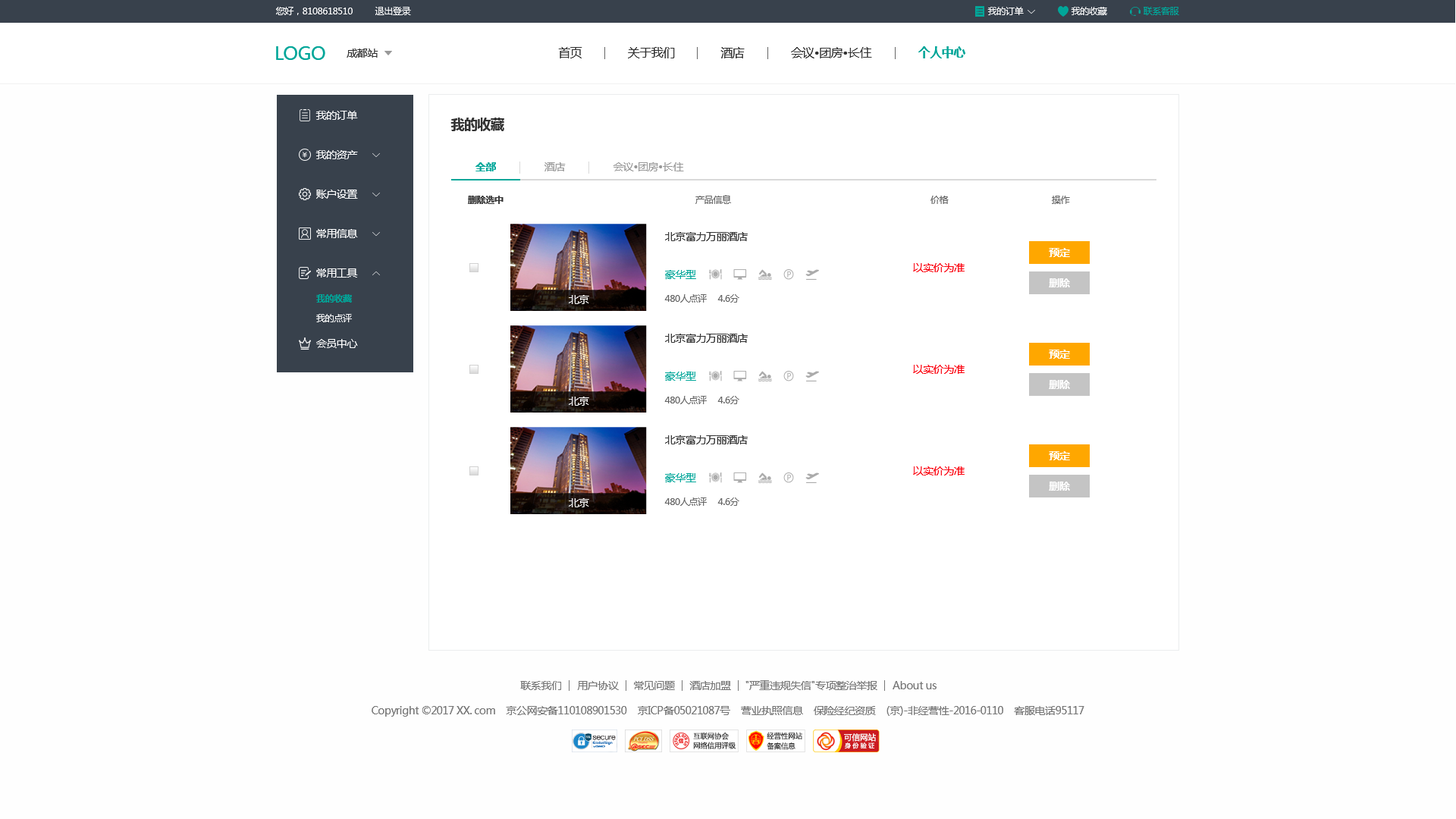
<style>
.page{position:relative;width:1456px;height:819px;background:#fefefe}
.page>*{position:absolute;margin:0}
.t1{font:9.1px "MicrosoftYaHei";letter-spacing:-0.03em;color:#ffffff}
.t2{font:9.1px "MicrosoftYaHei";letter-spacing:-0.03em;color:#00a699}
.t3{font:18.2px "MicrosoftYaHei";letter-spacing:-0.03em;color:#00a699}
.t4{font:10.6px "MicrosoftYaHei";letter-spacing:-0.03em;color:#333333}
.t5{font:12.1px "MicrosoftYaHei";letter-spacing:-0.03em;color:#333333}
.t6{font:12.1px "MicrosoftYaHei-Bold";letter-spacing:-0.03em;color:#00a699}
.t7{font:10.6px "MicrosoftYaHei";letter-spacing:-0.03em;color:#ffffff}
.t8{font:13.6px "MicrosoftYaHei-Bold";letter-spacing:-0.03em;color:#333333}
.t9{font:10.6px "MicrosoftYaHei-Bold";letter-spacing:-0.03em;color:#00a699}
.t10{font:10.6px "MicrosoftYaHei";letter-spacing:-0.03em;color:#999999}
.t11{font:9.1px "MicrosoftYaHei-Bold";letter-spacing:-0.03em;color:#333333}
.t12{font:9.1px "MicrosoftYaHei";letter-spacing:-0.03em;color:#666666}
.t13{font:10.6px "MicrosoftYaHei-Bold";letter-spacing:-0.03em;color:#ffffff}
.t14{font:10.6px "MicrosoftYaHei";letter-spacing:-0.03em;color:#00a699}
.t15{font:10.6px "MicrosoftYaHei";letter-spacing:-0.03em;color:#fb000d}
.t16{font:9.1px "MicrosoftYaHei-Bold";letter-spacing:-0.03em;color:#00a699}
.t17{font:9.1px "MicrosoftYaHei";letter-spacing:-0.03em;color:#fefefe}
.t18{font:10.6px "MicrosoftYaHei";letter-spacing:-0.03em;color:#777777}
</style>
<div class="page">
<p class="t1" style="left:276px;top:7px;width:77px;height:8px">您好，8108618510</p>
<p class="t1" style="left:375px;top:7px;width:36px;height:8px">退出登录</p>
<p class="t1" style="left:987px;top:7px;width:37px;height:8px">我的订单</p>
<p class="t1" style="left:1071px;top:7px;width:36px;height:8px">我的收藏</p>
<p class="t2" style="left:1144px;top:7px;width:35px;height:8px">联系客服</p>
<p class="t3" style="left:276px;top:46px;width:49px;height:14px">LOGO</p>
<p class="t4" style="left:347px;top:49px;width:31px;height:9px">成都站</p>
<p class="t5" style="left:558px;top:47px;width:24px;height:11px">首页</p>
<p class="t5" style="left:628px;top:47px;width:47px;height:11px">关于我们</p>
<p class="t5" style="left:720px;top:47px;width:25px;height:11px">酒店</p>
<p class="t5" style="left:791px;top:47px;width:81px;height:11px">会议•团房•长住</p>
<p class="t6" style="left:918px;top:46px;width:47px;height:12px">个人中心</p>
<p class="t7" style="left:315px;top:111px;width:43px;height:9px">我的订单</p>
<p class="t8" style="left:450px;top:118px;width:54px;height:13px">我的收藏</p>
<p class="t7" style="left:315px;top:150px;width:43px;height:9px">我的资产</p>
<p class="t9" style="left:475px;top:162px;width:21px;height:9px">全部</p>
<p class="t10" style="left:544px;top:162px;width:22px;height:9px">酒店</p>
<p class="t10" style="left:613px;top:162px;width:71px;height:9px">会议•团房•长住</p>
<p class="t7" style="left:316px;top:190px;width:42px;height:9px">账户设置</p>
<p class="t11" style="left:468px;top:196px;width:36px;height:8px">删除选中</p>
<p class="t12" style="left:695px;top:195px;width:36px;height:9px">产品信息</p>
<p class="t12" style="left:930px;top:196px;width:19px;height:8px">价格</p>
<p class="t12" style="left:1052px;top:196px;width:18px;height:8px">操作</p>
<p class="t7" style="left:316px;top:229px;width:42px;height:9px">常用信息</p>
<p class="t4" style="left:665px;top:232px;width:83px;height:9px">北京富力万丽酒店</p>
<p class="t13" style="left:1049px;top:248px;width:21px;height:9px">预定</p>
<p class="t7" style="left:316px;top:268px;width:42px;height:10px">常用工具</p>
<p class="t14" style="left:665px;top:270px;width:31px;height:9px">豪华型</p>
<p class="t15" style="left:913px;top:263px;width:52px;height:9px">以实价为准</p>
<p class="t13" style="left:1049px;top:278px;width:21px;height:9px">删除</p>
<p class="t16" style="left:316px;top:294px;width:36px;height:9px">我的收藏</p>
<p class="t7" style="left:569px;top:295px;width:20px;height:9px">北京</p>
<p class="t12" style="left:664px;top:294px;width:43px;height:9px">480人点评</p>
<p class="t12" style="left:717px;top:294px;width:22px;height:9px">4.6分</p>
<p class="t17" style="left:316px;top:314px;width:36px;height:8px">我的点评</p>
<p class="t7" style="left:316px;top:339px;width:42px;height:9px">会员中心</p>
<p class="t4" style="left:665px;top:334px;width:83px;height:9px">北京富力万丽酒店</p>
<p class="t13" style="left:1049px;top:350px;width:21px;height:9px">预定</p>
<p class="t15" style="left:913px;top:365px;width:52px;height:9px">以实价为准</p>
<p class="t14" style="left:665px;top:372px;width:31px;height:9px">豪华型</p>
<p class="t13" style="left:1049px;top:380px;width:21px;height:9px">删除</p>
<p class="t7" style="left:569px;top:397px;width:20px;height:9px">北京</p>
<p class="t12" style="left:664px;top:396px;width:43px;height:8px">480人点评</p>
<p class="t12" style="left:717px;top:396px;width:22px;height:8px">4.6分</p>
<p class="t4" style="left:665px;top:435px;width:83px;height:9px">北京富力万丽酒店</p>
<p class="t13" style="left:1049px;top:451px;width:21px;height:9px">预定</p>
<p class="t14" style="left:665px;top:473px;width:31px;height:9px">豪华型</p>
<p class="t15" style="left:913px;top:466px;width:52px;height:9px">以实价为准</p>
<p class="t13" style="left:1049px;top:482px;width:21px;height:9px">删除</p>
<p class="t12" style="left:664px;top:497px;width:43px;height:9px">480人点评</p>
<p class="t12" style="left:717px;top:497px;width:22px;height:9px">4.6分</p>
<p class="t7" style="left:569px;top:498px;width:20px;height:9px">北京</p>
<p class="t18" style="left:520px;top:681px;width:41px;height:9px">联系我们</p>
<p class="t18" style="left:577px;top:681px;width:42px;height:9px">用户协议</p>
<p class="t18" style="left:634px;top:681px;width:41px;height:9px">常见问题</p>
<p class="t18" style="left:689px;top:681px;width:42px;height:9px">酒店加盟</p>
<p class="t18" style="left:745px;top:680px;width:132px;height:10px">"严重违规失信"专项整治举报</p>
<p class="t18" style="left:893px;top:681px;width:44px;height:8px">About us</p>
<p class="t18" style="left:372px;top:706px;width:712px;height:11px">Copyright ©2017 XX. com    京公网安备110108901530    京ICP备05021087号    营业执照信息    保险经纪资质    (京)-非经营性-2016-0110    客服电话95117</p>
</div>
